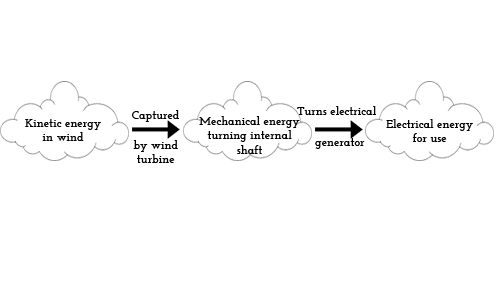
<style>
.page{position:relative;width:500px;height:300px;background:#ffffff}
.page>*{position:absolute;margin:0}
.t1{font:12px "JosefinSlab-Bold";color:#000000}
</style>
<div class="page">
<p class="t1" style="left:132px;top:110px;width:47px;height:12px">Captured</p>
<p class="t1" style="left:297px;top:106px;width:79px;height:9px">Turns electrical</p>
<p class="t1" style="left:25px;top:119px;width:76px;height:22px;text-align:center">Kinetic energy<br>in wind</p>
<p class="t1" style="left:199px;top:116px;width:101px;height:38px;text-align:center">Mechanical energy<br>turning internal<br>shaft</p>
<p class="t1" style="left:386px;top:119px;width:87px;height:23px;text-align:center">Electrical energy<br>for use</p>
<p class="t1" style="left:133px;top:140px;width:45px;height:23px;text-align:center">by wind<br>turbine</p>
<p class="t1" style="left:315px;top:138px;width:50px;height:11px">generator</p>
</div>
